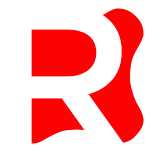
<style>
.page{position:relative;width:152px;height:152px;background:#ffffff}
.page>*{position:absolute;margin:0}
.t1{font:200px "GothamPro-Medium";letter-spacing:-0.025em;color:#ffffff}
</style>
<div class="page">
<p class="t1" style="left:7px;top:6px;width:119px;height:141px">R</p>
</div>
